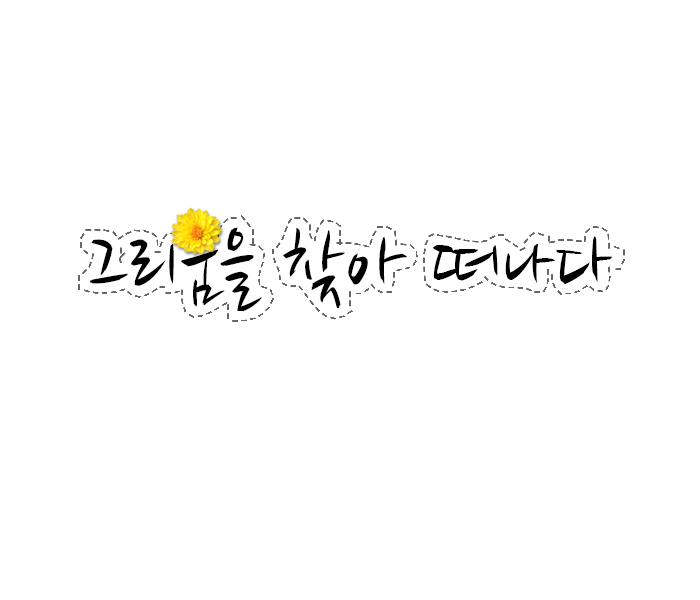
<style>
.page{position:relative;width:700px;height:600px;background:#ffffff}
.page>*{position:absolute;margin:0}
.t1{font:88px "NanumBrush";color:#000000}
</style>
<div class="page">
<p class="t1" style="left:90px;top:227px;width:523px;height:85px">그리움을 찾아 떠나다</p>
</div>
